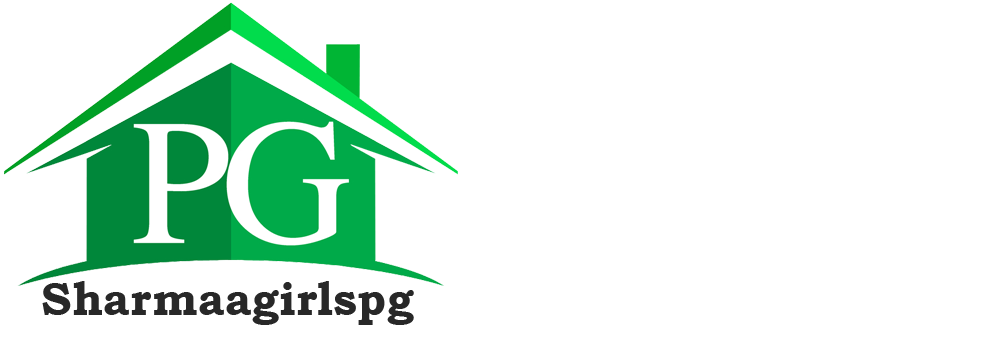
<style>
.page{position:relative;width:1000px;height:354px;background:#ffffff}
.page>*{position:absolute;margin:0}
.t1{font:46.6px "BookmanOldStyle-Bold";color:#282828}
</style>
<div class="page">
<p class="t1" style="left:42px;top:281px;width:372px;height:44px">Sharmaagirlspg</p>
</div>
